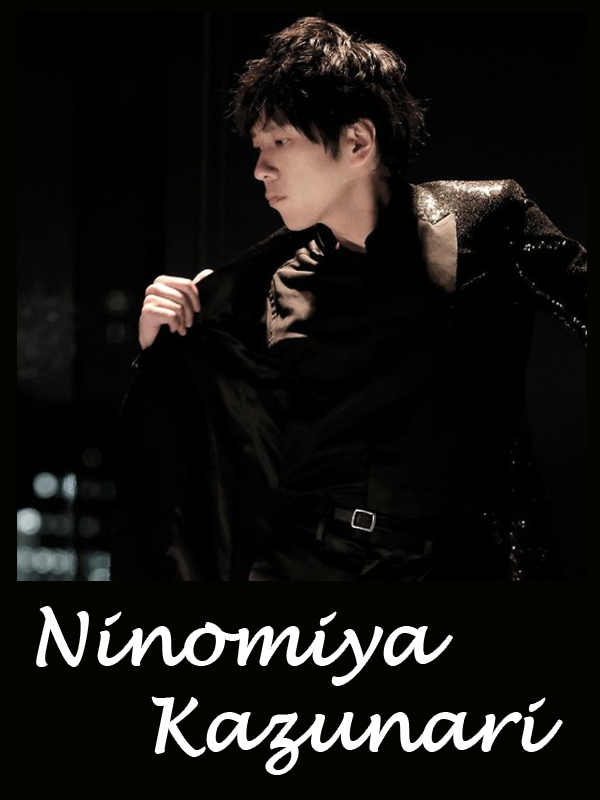
<style>
.page{position:relative;width:600px;height:800px;background:#030300}
.page>*{position:absolute;margin:0}
.t1{font:72px "LucidaHandwriting-Italic";color:#ffffff}
</style>
<div class="page">
<p class="t1" style="left:37px;top:607px;width:415px;height:78px">Ninomiya</p>
<p class="t1" style="left:152px;top:697px;width:410px;height:77px">Kazunari</p>
</div>
